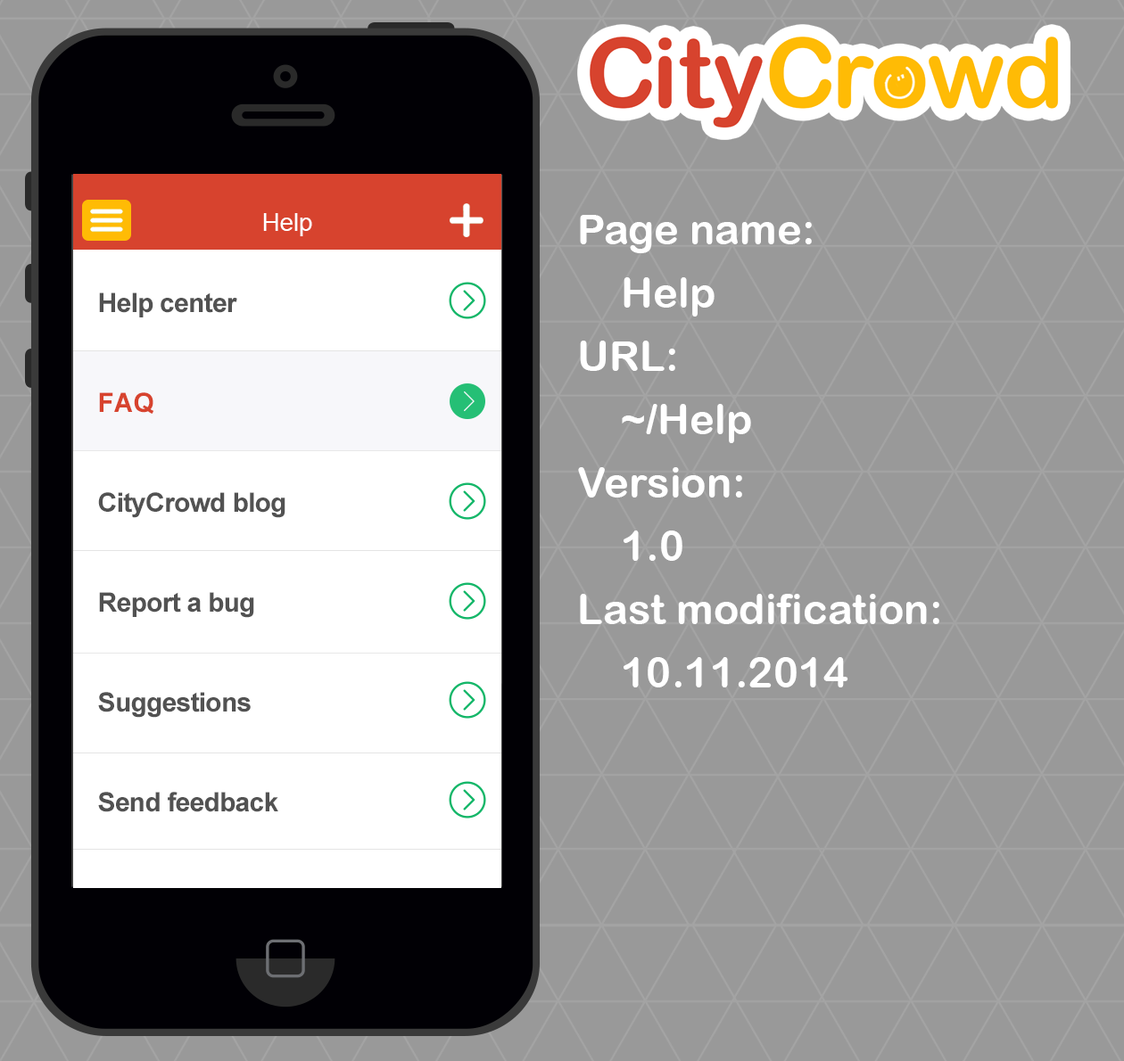
<style>
.page{position:relative;width:1124px;height:1061px;background:#999999}
.page>*{position:absolute;margin:0}
.t1{font:24.6px "ArialMT";color:#ffffff}
.t2{font:42.2px/63.3px "ArialRoundedMTBold";color:#ffffff}
.t3{font:26.8px/99.9px "Arial-BoldMT";letter-spacing:-0.025em;color:#525252}
.t4{font:26.8px/99.9px "Arial-BoldMT";color:#d7432e}
</style>
<div class="page">
<p class="t1" style="left:263px;top:213px;width:49px;height:23px">Help</p>
<p class="t2" style="left:578px;top:215px;width:361px;height:473px">Page name:<br>Help<br>URL:<br>~/Help<br>Version:<br>1.0<br>Last modification:<br>10.11.2014</p>
<p class="t3" style="left:98px;top:293px;width:187px;height:519px">Help center<br><span class="t4">FAQ<br></span>CityCrowd blog<br>Report a bug<br>Suggestions<br>Send feedback</p>
</div>
